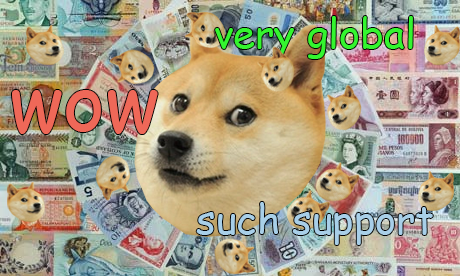
<style>
.page{position:relative;width:460px;height:276px}
.page>*{position:absolute;margin:0}
.t1{font:40px "ComicSansMS";color:#34f52f}
.t2{font:80px "ComicSansMS";color:#ef6858}
.t3{font:40px "ComicSansMS";color:#a8cfe8}
</style>
<div class="page">
<p class="t1" style="left:215px;top:16px;width:198px;height:43px">very global</p>
<p class="t2" style="left:12px;top:90px;width:146px;height:44px">wow</p>
<p class="t3" style="left:196px;top:202px;width:237px;height:43px">such support</p>
</div>
